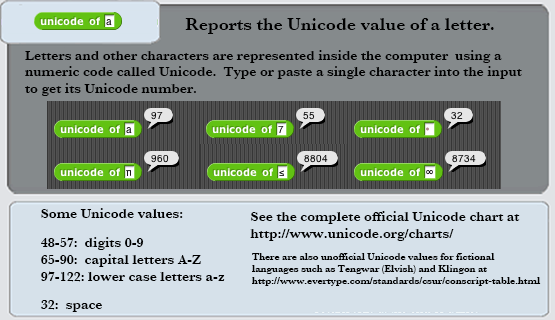
<style>
.page{position:relative;width:555px;height:320px;background:#d6e1ea}
.page>*{position:absolute;margin:0}
.t1{font:18px "Baskerville-SemiBold";color:#000000}
.t2{font:14px "Baskerville-SemiBold";color:#000000}
.t3{font:10px "Baskerville-SemiBold";color:#000000}
</style>
<div class="page">
<p class="t1" style="left:185px;top:18px;width:309px;height:16px">Reports the Unicode value of a letter.</p>
<p class="t2" style="left:25px;top:50px;width:497px;height:46px">Letters and other characters are represented inside the computer  using a<br>numeric code called Unicode.  Type or paste a single character into the input<br>to get its Unicode number.</p>
<p class="t2" style="left:41px;top:208px;width:184px;height:104px">Some Unicode values:<br> <br>48-57:  digits 0-9<br>65-90:  capital letters A-Z<br>97-122: lower case letters a-z<br> <br>32:  space</p>
<p class="t2" style="left:250px;top:211px;width:270px;height:30px">See the complete official Unicode chart at<br>http://www.unicode.org/charts/</p>
<p class="t3" style="left:252px;top:253px;width:289px;height:33px">There are also unofficial Unicode values for fictional<br>languages such as Tengwar (Elvish) and Klingon at<br>http://www.evertype.com/standards/csur/conscript-table.html</p>
</div>
